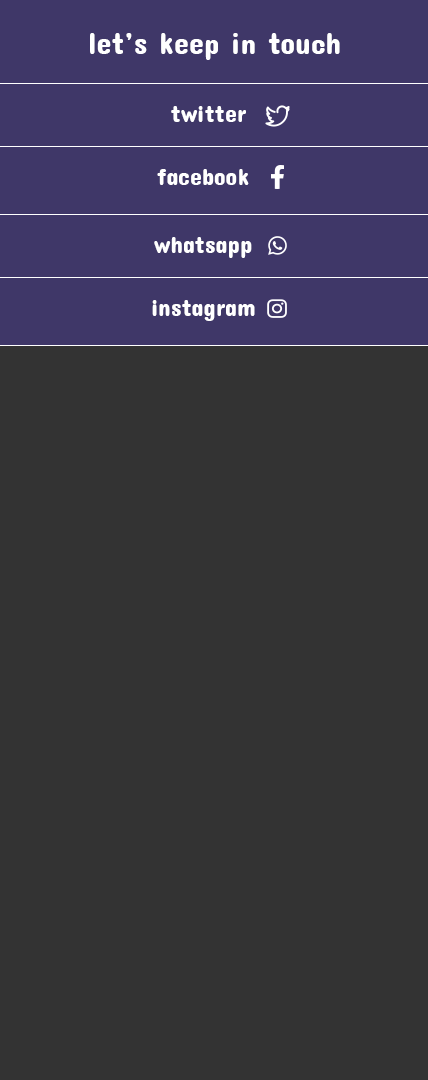
<style>
.page{position:relative;width:428px;height:1080px;background:#333333}
.page>*{position:absolute;margin:0}
.t1{font:30px "ConcertOne-Regular";color:#ffffff}
.t2{font:24px "ConcertOne-Regular";color:#ffffff}
</style>
<div class="page">
<p class="t1" style="left:90px;top:33px;width:250px;height:27px">let’s keep in touch</p>
<p class="t2" style="left:171px;top:106px;width:75px;height:16px">twitter</p>
<p class="t2" style="left:157px;top:169px;width:92px;height:16px">facebook</p>
<p class="t2" style="left:154px;top:237px;width:98px;height:21px">whatsapp</p>
<p class="t2" style="left:152px;top:300px;width:103px;height:21px">instagram</p>
</div>
